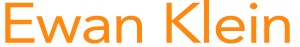
<style>
.page{position:relative;width:300px;height:47px;background:#ffffff}
.page>*{position:absolute;margin:0}
.t1{font:56.4px "Avenir-Roman";letter-spacing:-0.025em;color:#ff890f;scale:1.12 1}
</style>
<div class="page">
<p class="t1" style="left:5px;top:0px;width:285px;height:44px">Ewan Klein</p>
</div>
